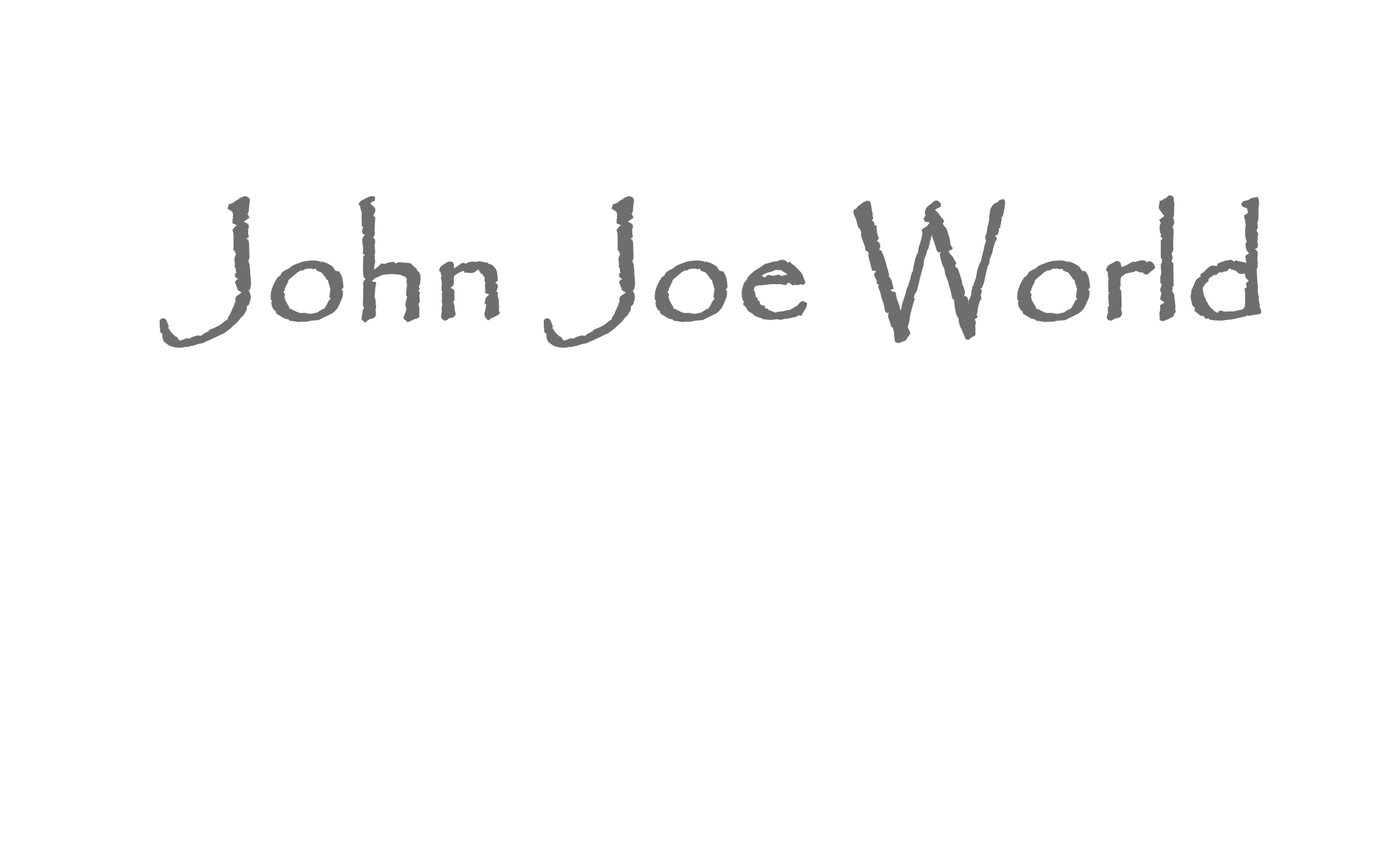
<style>
.page{position:relative;width:1381px;height:863px;background:#ffffff}
.page>*{position:absolute;margin:0}
.t1{font:146.7px "Papyrus-Regular";color:#6d6e6e;font-weight:bold}
</style>
<div class="page">
<p class="t1" style="left:159px;top:195px;width:1103px;height:153px">John Joe World</p>
</div>
